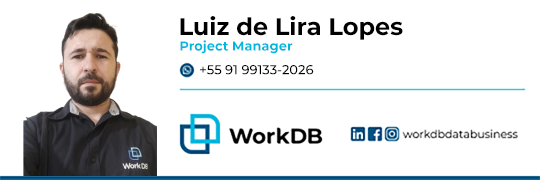
<style>
.page{position:relative;width:540px;height:180px;background:#ffffff}
.page>*{position:absolute;margin:0}
.t1{font:24px "Montserrat-Bold";color:#000000}
.t2{font:13px "Montserrat-Bold";color:#00b8de}
.t3{font:13px "MontserratRoman-Medium";color:#000000}
</style>
<div class="page">
<p class="t1" style="left:180px;top:16px;width:223px;height:24px">Luiz de Lira Lopes</p>
<p class="t2" style="left:180px;top:40px;width:113px;height:14px">Project Manager</p>
<p class="t3" style="left:200px;top:65px;width:114px;height:10px">+55 91 99133-2026</p>
</div>
